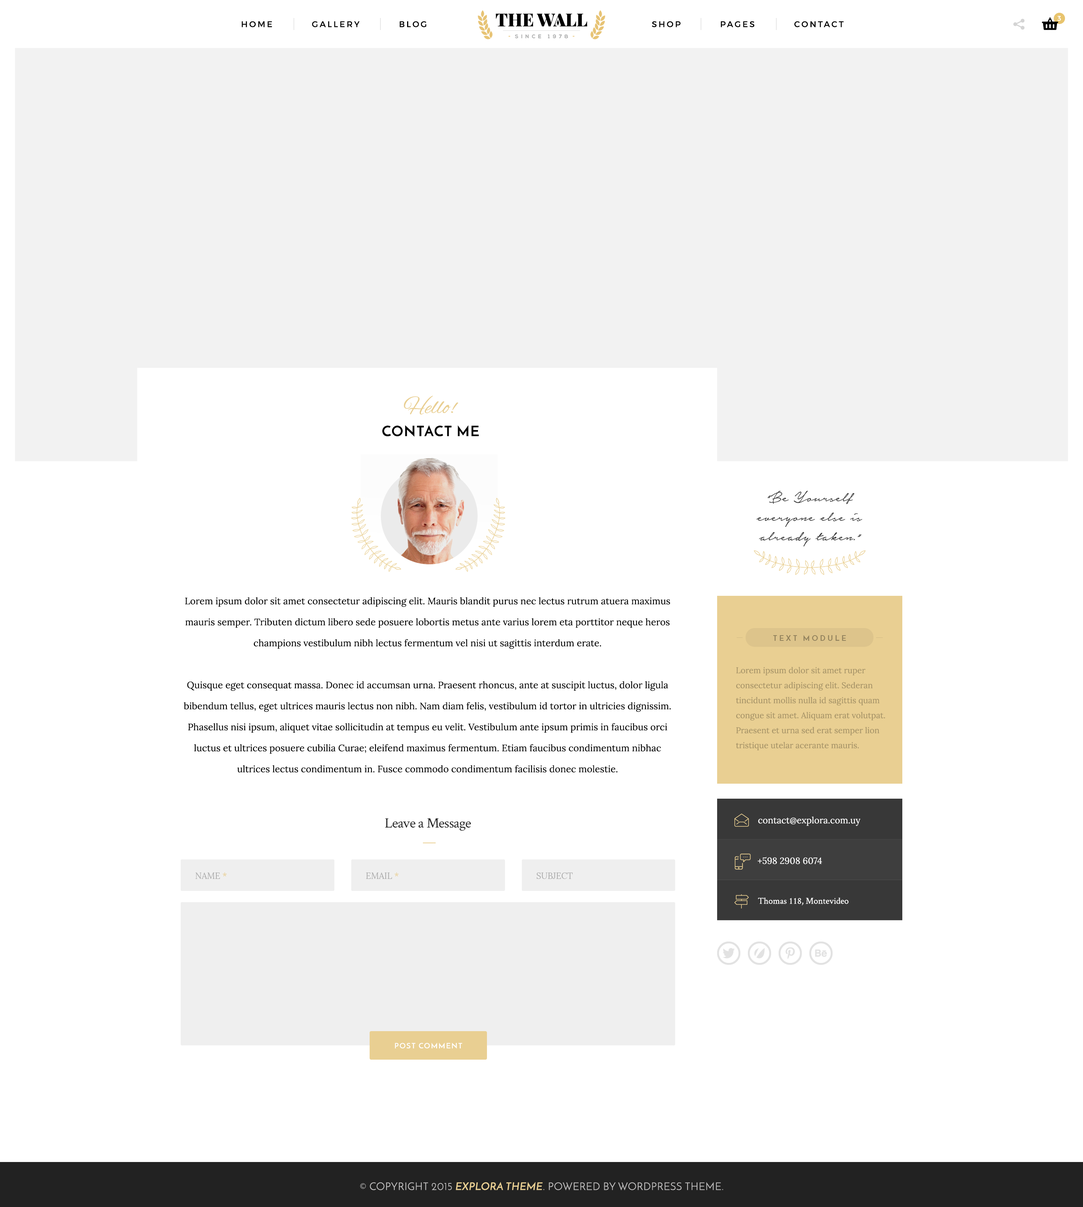
<style>
.page{position:relative;width:1083px;height:1207px;background:#ffffff}
.page>*{position:absolute;margin:0}
.t1{font:6.7px "Montserrat-Regular";letter-spacing:0.2em;color:#ffffff;text-transform:uppercase}
.t2{font:8.2px "Montserrat-Regular";letter-spacing:0.2em;color:#000000;text-transform:uppercase}
.t3{font:23.2px "AlexBrush-Regular";color:#e9cf92}
.t4{font:14.3px "JosefinSans-Bold";letter-spacing:0.06em;color:#000000;text-transform:uppercase}
.t5{font:18.7px/19.5px "NoteraPersonalUseOnly";color:#343434}
.t6{font:9.4px/21px "Lora-Regular";color:#000000}
.t7{font:7.5px "JosefinSans-Bold";letter-spacing:0.28em;color:#91815c}
.t8{font:8.3px/15px "Lora-Regular";color:#a79468}
.t9{font:14.3px "CrimsonText-Roman";letter-spacing:-0.025em;color:#202020}
.t10{font:9px "Lora-Regular";color:#ffffff}
.t11{font:8.6px "Lora-Regular";color:#ababab;text-transform:uppercase}
.t12{font:8.6px "Lora-Regular";color:#e9cf92;text-transform:uppercase}
.t13{font:9px "CrimsonText-Roman";color:#ffffff}
.t14{font:7.5px "JosefinSans-Bold";letter-spacing:0.1em;color:#ffffff}
.t15{font:10.5px "JosefinSans";letter-spacing:0.02em;color:#c1c0c0;text-transform:uppercase}
.t16{font:10.5px "JosefinSans-SemiBold";letter-spacing:0.02em;color:#e9cf92;text-transform:uppercase}
</style>
<div class="page">
<p class="t1" style="left:1058px;top:16px;width:3px;height:5px">3</p>
<p class="t2" style="left:242px;top:21px;width:602px;height:6px">HOME          GALLERY          BLOG                                                           SHOP          PAGES          CONTACT</p>
<p class="t3" style="left:404px;top:396px;width:55px;height:19px">Hello!</p>
<p class="t4" style="left:382px;top:425px;width:97px;height:12px">CONTACT ME</p>
<p class="t5" style="left:756px;top:491px;width:107px;height:56px;text-align:center">“Be Yourself everyone else is already taken.”</p>
<p class="t6" style="left:184px;top:597px;width:487px;height:176px;text-align:center">Lorem ipsum dolor sit amet consectetur adipiscing elit. Mauris blandit purus nec lectus rutrum atuera maximus mauris semper. Tributen dictum libero sede posuere lobortis metus ante varius lorem eta porttitor neque heros champions vestibulum nibh lectus fermentum vel nisi ut sagittis interdum erate.<br><br>Quisque eget consequat massa. Donec id accumsan urna. Praesent rhoncus, ante at suscipit luctus, dolor ligula bibendum tellus, eget ultrices mauris lectus non nibh. Nam diam felis, vestibulum id tortor in ultricies dignissim. Phasellus nisi ipsum, aliquet vitae sollicitudin at tempus eu velit. Vestibulum ante ipsum primis in faucibus orci luctus et ultrices posuere cubilia Curae; eleifend maximus fermentum. Etiam faucibus condimentum nibhac ultrices lectus condimentum in. Fusce commodo condimentum facilisis donec molestie.</p>
<p class="t7" style="left:773px;top:635px;width:73px;height:6px">TEXT MODULE</p>
<p class="t8" style="left:736px;top:667px;width:149px;height:83px">Lorem ipsum dolor sit amet ruper consectetur adipiscing elit. Sederan tincidunt mollis nulla id sagittis quam congue sit amet. Aliquam erat volutpat. Praesent et urna sed erat semper lion tristique utelar acerante mauris.</p>
<p class="t9" style="left:385px;top:818px;width:86px;height:13px">Leave a Message</p>
<p class="t10" style="left:758px;top:816px;width:103px;height:10px">contact@explora.com.uy</p>
<p class="t10" style="left:758px;top:857px;width:64px;height:7px">+598 2908 6074</p>
<p class="t11" style="left:195px;top:873px;width:32px;height:6px">Name <span class="t12">*</span></p>
<p class="t11" style="left:366px;top:873px;width:33px;height:6px">EMAIL <span class="t12">*</span></p>
<p class="t11" style="left:537px;top:873px;width:36px;height:6px">SUBJECT</p>
<p class="t13" style="left:758px;top:897px;width:91px;height:9px">Thomas 118, Montevideo</p>
<p class="t14" style="left:395px;top:1043px;width:67px;height:6px">POST COMMENT</p>
<p class="t15" style="left:360px;top:1182px;width:363px;height:9px">© COPYRIGHT 2015 <span class="t16">EXPLORA THEME</span>. POWERED BY WORDPRESS THEME.</p>
</div>
